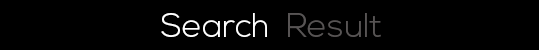
<style>
.page{position:relative;width:539px;height:50px;background:#000000}
.page>*{position:absolute;margin:0}
.t1{font:33.1px "NexaLight";color:#ffffff}
.t2{font:33.1px "NexaLight";color:#575454}
</style>
<div class="page">
<p class="t1" style="left:161px;top:13px;width:106px;height:24px">Search</p>
<p class="t2" style="left:288px;top:13px;width:93px;height:24px">Result</p>
</div>
